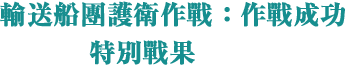
<style>
.page{position:relative;width:345px;height:66px;background:#ffffff}
.page>*{position:absolute;margin:0}
.t1{font:26px/38px "RyuminPr6N-ExBold";color:#178e8f;font-weight:bold}
</style>
<div class="page">
<p class="t1" style="left:0px;top:1px;width:346px;height:64px">輸送船團護衛作戰：作戰成功<br>　　　 特別戰果</p>
</div>
